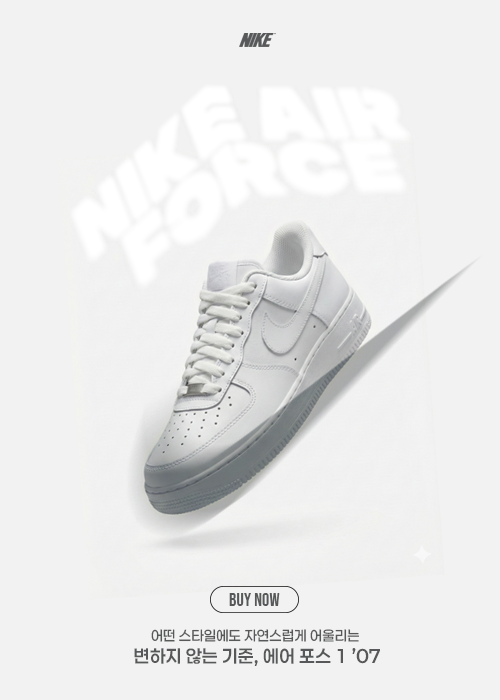
<style>
.page{position:relative;width:500px;height:700px;background:#f2f2f2}
.page>*{position:absolute;margin:0}
.t1{font:18px "BebasNeue-Regular";letter-spacing:0.01em;color:#575859}
.t2{font:14px "Paperlogy-5Medium";letter-spacing:0.01em;color:#575859}
.t3{font:18px "Paperlogy-6SemiBold";letter-spacing:0.01em;color:#575859}
</style>
<div class="page">
<p class="t1" style="left:229px;top:593px;width:51px;height:13px">buy now</p>
<p class="t2" style="left:151px;top:629px;width:208px;height:13px">어떤 스타일에도 자연스럽게 어울리는</p>
<p class="t3" style="left:134px;top:648px;width:246px;height:18px">변하지 않는 기준, 에어 포스 1 ’07</p>
</div>
